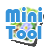
<style>
.page{position:relative;width:48px;height:48px;background:#ffffff}
.page>*{position:absolute;margin:0}
.t1{font:20px "Bauhaus93";letter-spacing:0.1em;color:#3693d9}
.t2{font:19px "Bauhaus93";letter-spacing:0.05em;color:#3693d9}
</style>
<div class="page">
<p class="t1" style="left:5px;top:7px;width:37px;height:15px">Mini</p>
<p class="t2" style="left:5px;top:26px;width:37px;height:13px">Tool</p>
</div>
